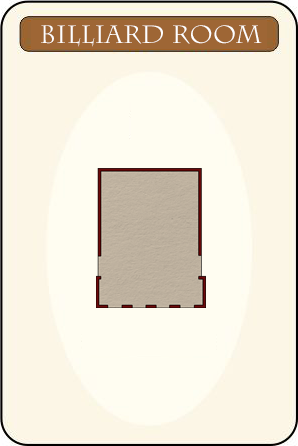
<style>
.page{position:relative;width:298px;height:446px;background:#fcf6e6}
.page>*{position:absolute;margin:0}
.t1{font:25px "CharlemagneStd-Regular";color:#ffffff}
</style>
<div class="page">
<p class="t1" style="left:41px;top:25px;width:221px;height:22px">Billiard rOOM</p>
</div>
